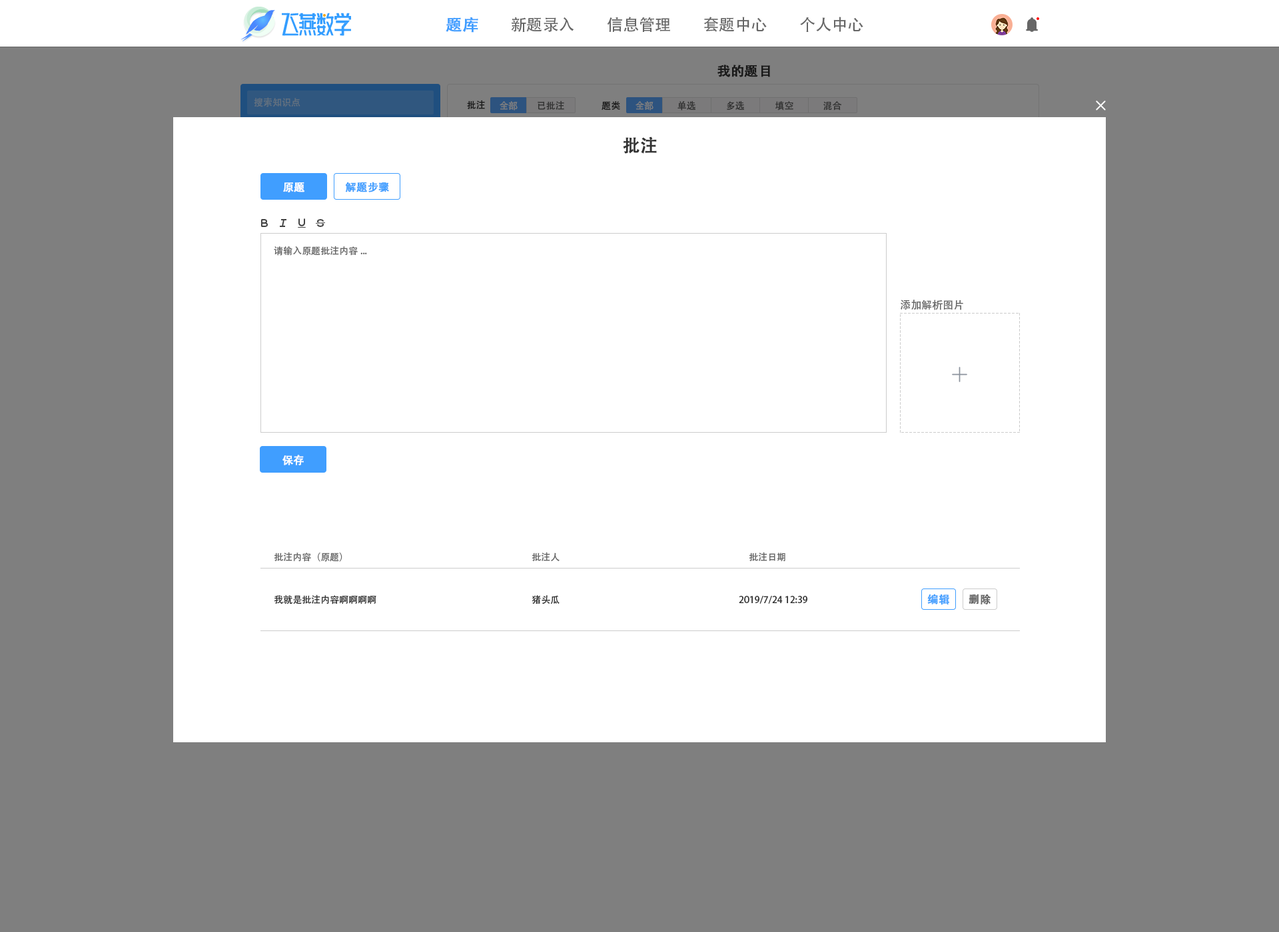
<style>
.page{position:relative;width:1279px;height:932px;background:#ffffff}
.page>*{position:absolute;margin:0}
.t1{font:16px "AdobeHeitiStd-Regular";color:#409eff;font-weight:bold}
.t2{font:16px "AdobeHeitiStd-Regular";color:#666666}
.t3{font:13.3px "AdobeHeitiStd-Regular";color:#191919;font-weight:bold}
.t4{font:9.3px "AdobeHeitiStd-Regular";color:#61707f}
.t5{font:9.3px "AdobeHeitiStd-Regular";color:#191919}
.t6{font:9.3px "AdobeHeitiStd-Regular";color:#7f7f7f}
.t7{font:9.3px "AdobeHeitiStd-Regular";color:#333333}
.t8{font:17.3px "AdobeHeitiStd-Regular";color:#333333;font-weight:bold}
.t9{font:10.7px "AdobeHeitiStd-Regular";color:#ffffff;font-weight:bold}
.t10{font:10.7px "AdobeHeitiStd-Regular";color:#409eff;font-weight:bold}
.t11{font:9.3px "AdobeHeitiStd-Regular";color:#666666}
.t12{font:10.7px "AdobeHeitiStd-Regular";color:#666666}
.t13{font:10.7px "AdobeHeitiStd-Regular";color:#666666;font-weight:bold}
</style>
<div class="page">
<p class="t1" style="left:446px;top:17px;width:32px;height:16px">题库</p>
<p class="t2" style="left:511px;top:17px;width:63px;height:15px">新题录入</p>
<p class="t2" style="left:607px;top:17px;width:63px;height:16px">信息管理</p>
<p class="t2" style="left:704px;top:17px;width:63px;height:15px">套题中心</p>
<p class="t2" style="left:800px;top:17px;width:63px;height:15px">个人中心</p>
<p class="t3" style="left:717px;top:65px;width:53px;height:12px">我的题目</p>
<p class="t4" style="left:254px;top:97px;width:46px;height:10px">搜索知识点</p>
<p class="t5" style="left:467px;top:100px;width:18px;height:9px">批注</p>
<p class="t6" style="left:500px;top:101px;width:18px;height:10px">全部</p>
<p class="t7" style="left:537px;top:101px;width:27px;height:9px">已批注</p>
<p class="t5" style="left:601px;top:101px;width:19px;height:10px">题类</p>
<p class="t6" style="left:635px;top:101px;width:18px;height:10px">全部</p>
<p class="t7" style="left:677px;top:101px;width:18px;height:10px">单选</p>
<p class="t7" style="left:727px;top:101px;width:17px;height:9px">多选</p>
<p class="t7" style="left:775px;top:101px;width:18px;height:10px">填空</p>
<p class="t7" style="left:823px;top:101px;width:19px;height:10px">混合</p>
<p class="t8" style="left:623px;top:137px;width:34px;height:17px">批注</p>
<p class="t9" style="left:283px;top:182px;width:22px;height:10px">原题</p>
<p class="t10" style="left:345px;top:182px;width:44px;height:10px">解题步骤</p>
<p class="t11" style="left:274px;top:246px;width:93px;height:10px">请输入原题批注内容...</p>
<p class="t12" style="left:900px;top:300px;width:63px;height:10px">添加解析图片</p>
<p class="t9" style="left:282px;top:455px;width:22px;height:11px">保存</p>
<p class="t11" style="left:274px;top:552px;width:68px;height:10px">批注内容（原题）</p>
<p class="t11" style="left:532px;top:552px;width:27px;height:9px">批注人</p>
<p class="t11" style="left:749px;top:552px;width:36px;height:9px">批注日期</p>
<p class="t7" style="left:274px;top:595px;width:102px;height:10px">我就是批注内容啊啊啊啊</p>
<p class="t7" style="left:532px;top:595px;width:27px;height:10px">猪头瓜</p>
<p class="t7" style="left:739px;top:596px;width:68px;height:8px">2019/7/24 12:39</p>
<p class="t10" style="left:927px;top:594px;width:23px;height:11px">编辑</p>
<p class="t13" style="left:968px;top:594px;width:23px;height:11px">删除</p>
</div>
